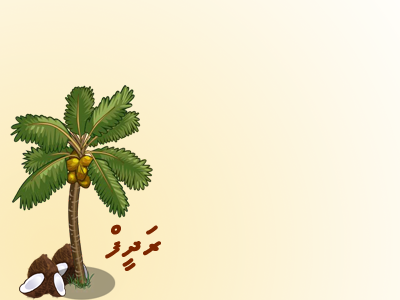
<style>
.page{position:relative;width:400px;height:300px}
.page>*{position:absolute;margin:0}
.t1{font:36px "MvMAGR";color:#7c2600}
</style>
<div class="page">
<p class="t1" style="left:105px;top:224px;width:56px;height:47px">ްފީދަރ</p>
</div>
